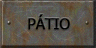
<style>
.page{position:relative;width:96px;height:48px}
.page>*{position:absolute;margin:0}
.t1{font:14.7px "Tahoma";letter-spacing:-0.01em;color:#000000;text-transform:uppercase;font-weight:bold}
</style>
<div class="page">
<p class="t1" style="left:28px;top:14px;width:42px;height:16px">pátio</p>
</div>
